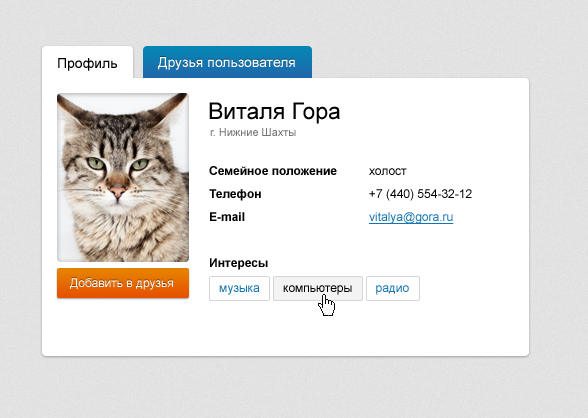
<style>
.page{position:relative;width:588px;height:418px;background:#ffffff}
.page>*{position:absolute;margin:0}
.t1{font:14px "ArialMT";color:#000000}
.t2{font:14px "ArialMT";color:#ffffff}
.t3{font:23px "ArialMT";color:#000000}
.t4{font:11px "ArialMT";color:#757575}
.t5{font:12px/23px "Arial-BoldMT";color:#000000}
.t6{font:12px/23px "ArialMT";color:#000000}
.t7{font:12px/23px "ArialMT";color:#1574af;text-decoration:underline}
.t8{font:12px "ArialMT";color:#ffffff}
.t9{font:12px "ArialMT";color:#000000}
.t10{font:12px "ArialMT";color:#1574af}
</style>
<div class="page">
<p class="t1" style="left:58px;top:58px;width:59px;height:13px">Профиль</p>
<p class="t2" style="left:158px;top:57px;width:137px;height:13px">Друзья пользователя</p>
<p class="t3" style="left:209px;top:102px;width:131px;height:22px">Виталя Гора</p>
<p class="t4" style="left:210px;top:128px;width:86px;height:8px">г. Нижние Шахты</p>
<p class="t5" style="left:209px;top:166px;width:128px;height:104px">Семейное положение<br>Телефон<br>E-mail<br><br>Интересы</p>
<p class="t6" style="left:369px;top:168px;width:103px;height:56px">холост<br>+7 (440) 554-32-12<br><span class="t7">vitalya@gora.ru</span></p>
<p class="t8" style="left:70px;top:278px;width:103px;height:12px">Добавить в друзья</p>
<p class="t9" style="left:219px;top:285px;width:190px;height:10px"><span class="t10">музыка       </span>компьютеры<span class="t10">       радио</span></p>
</div>
